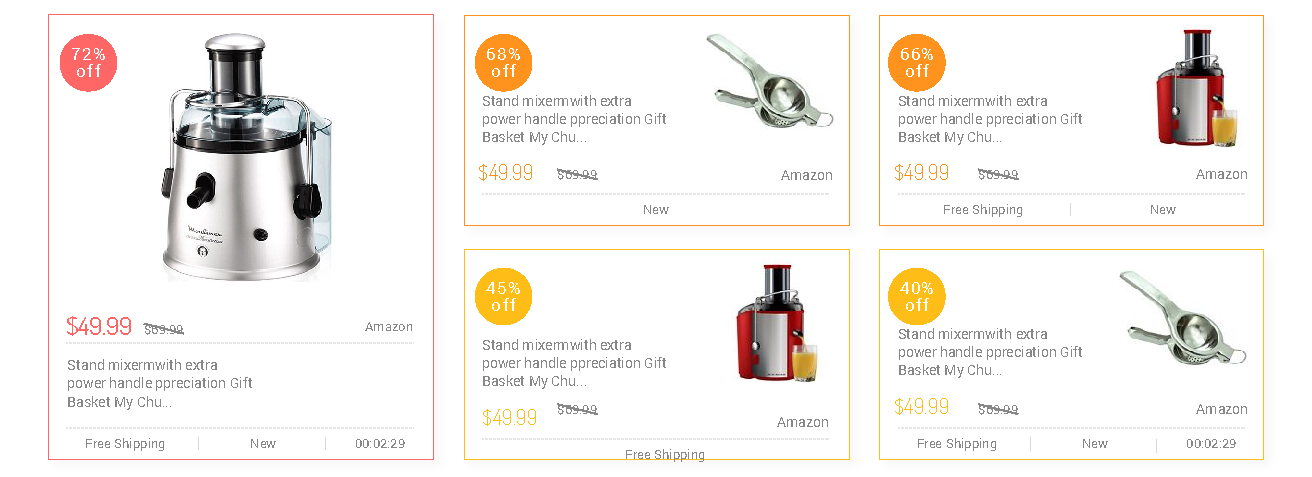
<style>
.page{position:relative;width:1312px;height:477px;background:#ffffff}
.page>*{position:absolute;margin:0}
.t1{font:17px/17.1px "Roboto-Regular";letter-spacing:0.08em;color:#ffffff}
.t2{font:14px/18.1px "Roboto-Regular";color:#878787}
.t3{font:21px "Dosis-Regular";color:#ff931d}
.t4{font:12.8px "Roboto-Regular";color:#878787}
.t5{font:14px "Roboto-Regular";color:#878787}
.t6{font:13px "Roboto-Regular";color:#878787}
.t7{font:25px "Dosis-Regular";color:#ff6666}
.t8{font:21px "Dosis-Regular";color:#ffbe17}
</style>
<div class="page">
<p class="t1" style="left:72px;top:48px;width:33px;height:29px;text-align:center">72%<br>off</p>
<p class="t1" style="left:487px;top:48px;width:33px;height:29px;text-align:center">68%<br>off</p>
<p class="t1" style="left:901px;top:48px;width:32px;height:29px;text-align:center">66%<br>off</p>
<p class="t2" style="left:483px;top:95px;width:183px;height:50px">Stand mixermwith extra<br>power handle ppreciation Gift<br>Basket My Chu...</p>
<p class="t2" style="left:899px;top:95px;width:183px;height:50px">Stand mixermwith extra<br>power handle ppreciation Gift<br>Basket My Chu...</p>
<p class="t3" style="left:479px;top:164px;width:53px;height:17px">$49.99</p>
<p class="t4" style="left:558px;top:169px;width:39px;height:11px">$69.99</p>
<p class="t5" style="left:781px;top:170px;width:51px;height:10px">Amazon</p>
<p class="t3" style="left:895px;top:164px;width:53px;height:17px">$49.99</p>
<p class="t4" style="left:979px;top:169px;width:39px;height:11px">$69.99</p>
<p class="t5" style="left:1196px;top:169px;width:51px;height:10px">Amazon</p>
<p class="t6" style="left:644px;top:205px;width:25px;height:9px">New</p>
<p class="t6" style="left:944px;top:204px;width:78px;height:13px">Free Shipping</p>
<p class="t6" style="left:1151px;top:205px;width:25px;height:9px">New</p>
<p class="t1" style="left:486px;top:282px;width:34px;height:29px;text-align:center">45%<br>off</p>
<p class="t1" style="left:900px;top:282px;width:33px;height:29px;text-align:center">40%<br>off</p>
<p class="t7" style="left:67px;top:316px;width:64px;height:20px">$49.99</p>
<p class="t4" style="left:145px;top:324px;width:38px;height:11px">$69.99</p>
<p class="t6" style="left:365px;top:322px;width:47px;height:9px">Amazon</p>
<p class="t2" style="left:899px;top:328px;width:183px;height:50px">Stand mixermwith extra<br>power handle ppreciation Gift<br>Basket My Chu...</p>
<p class="t2" style="left:483px;top:339px;width:183px;height:50px">Stand mixermwith extra<br>power handle ppreciation Gift<br>Basket My Chu...</p>
<p class="t2" style="left:68px;top:359px;width:184px;height:51px">Stand mixermwith extra<br>power handle ppreciation Gift<br>Basket My Chu...</p>
<p class="t8" style="left:895px;top:398px;width:53px;height:17px">$49.99</p>
<p class="t8" style="left:483px;top:409px;width:53px;height:17px">$49.99</p>
<p class="t4" style="left:558px;top:404px;width:39px;height:11px">$69.99</p>
<p class="t4" style="left:979px;top:404px;width:39px;height:11px">$69.99</p>
<p class="t5" style="left:1196px;top:404px;width:51px;height:10px">Amazon</p>
<p class="t5" style="left:777px;top:417px;width:51px;height:10px">Amazon</p>
<p class="t6" style="left:86px;top:438px;width:78px;height:13px">Free Shipping</p>
<p class="t6" style="left:918px;top:438px;width:78px;height:13px">Free Shipping</p>
<p class="t6" style="left:251px;top:439px;width:25px;height:9px">New</p>
<p class="t6" style="left:356px;top:439px;width:49px;height:9px">00:02:29</p>
<p class="t6" style="left:626px;top:449px;width:78px;height:13px">Free Shipping</p>
<p class="t6" style="left:1083px;top:439px;width:25px;height:9px">New</p>
<p class="t6" style="left:1187px;top:439px;width:49px;height:9px">00:02:29</p>
</div>
